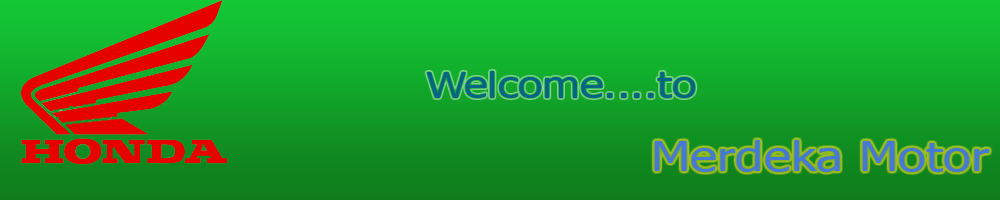
<style>
.page{position:relative;width:1000px;height:200px}
.page>*{position:absolute;margin:0}
.t1{font:35.6px "Tahoma";color:#046585;scale:1.25 1}
.t2{font:40.9px "Tahoma";color:#4679d6;scale:1.25 1}
</style>
<div class="page">
<p class="t1" style="left:426px;top:71px;width:270px;height:27px">Welcome....to</p>
<p class="t2" style="left:654px;top:140px;width:336px;height:32px">Merdeka Motor</p>
</div>
